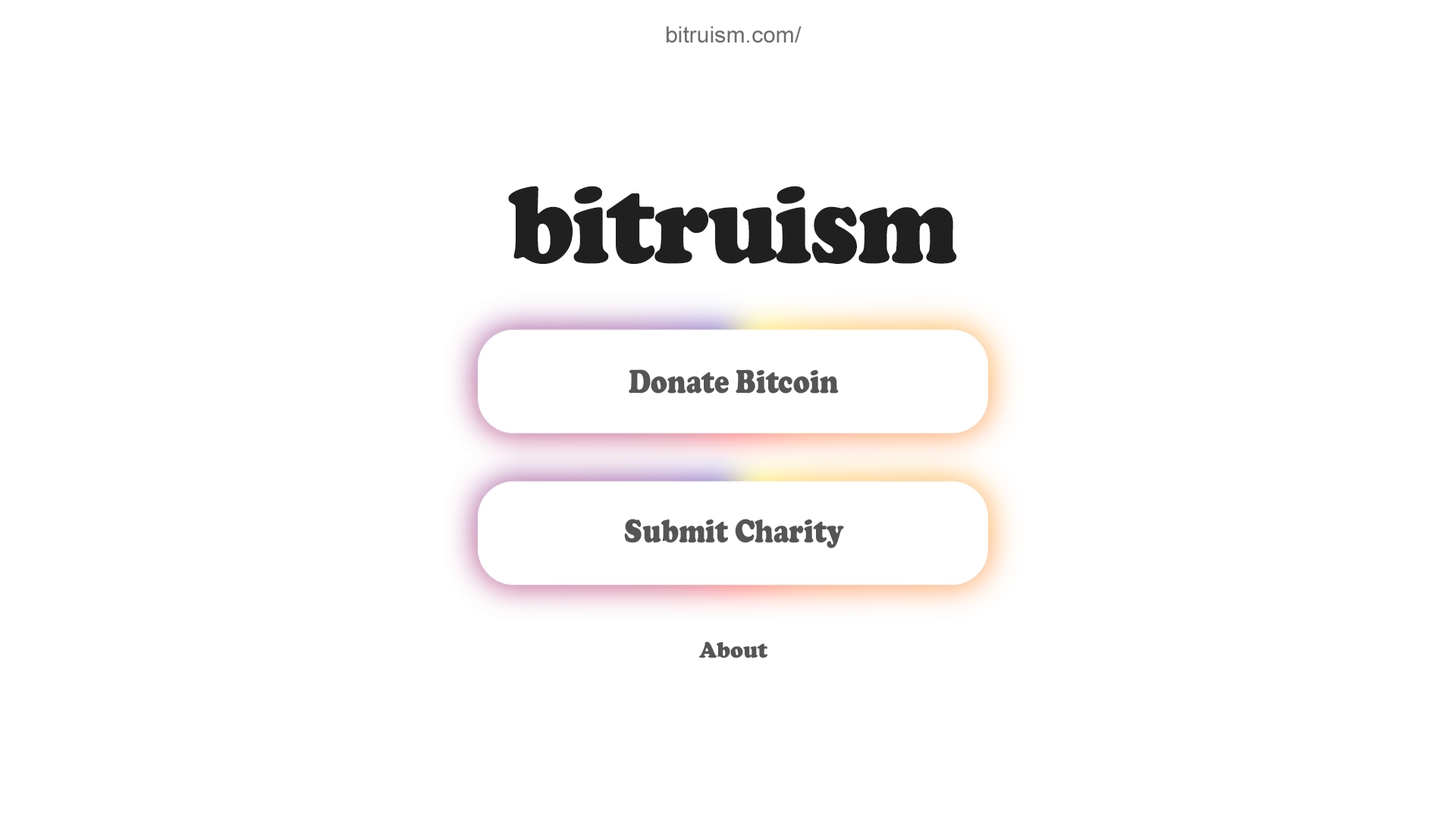
<style>
.page{position:relative;width:1456px;height:819px;background:#ffffff}
.page>*{position:absolute;margin:0}
.t1{font:22.4px "ArialMT";color:#6e6e6e}
.t2{font:114.1px "CooperBlack";letter-spacing:-0.02em;color:#202020;scale:0.91 1}
.t3{font:34.1px "CooperBlack";color:#555555;scale:0.81 1}
.t4{font:23px "CooperBlack";color:#555555;scale:0.93 1}
</style>
<div class="page">
<p class="t1" style="left:667px;top:26px;width:135px;height:17px">bitruism.com/</p>
<p class="t2" style="left:508px;top:186px;width:449px;height:78px">bitruism</p>
<p class="t3" style="left:629px;top:369px;width:210px;height:25px">Donate Bitcoin</p>
<p class="t3" style="left:624px;top:519px;width:220px;height:29px">Submit Charity</p>
<p class="t4" style="left:699px;top:642px;width:68px;height:16px">About</p>
</div>
